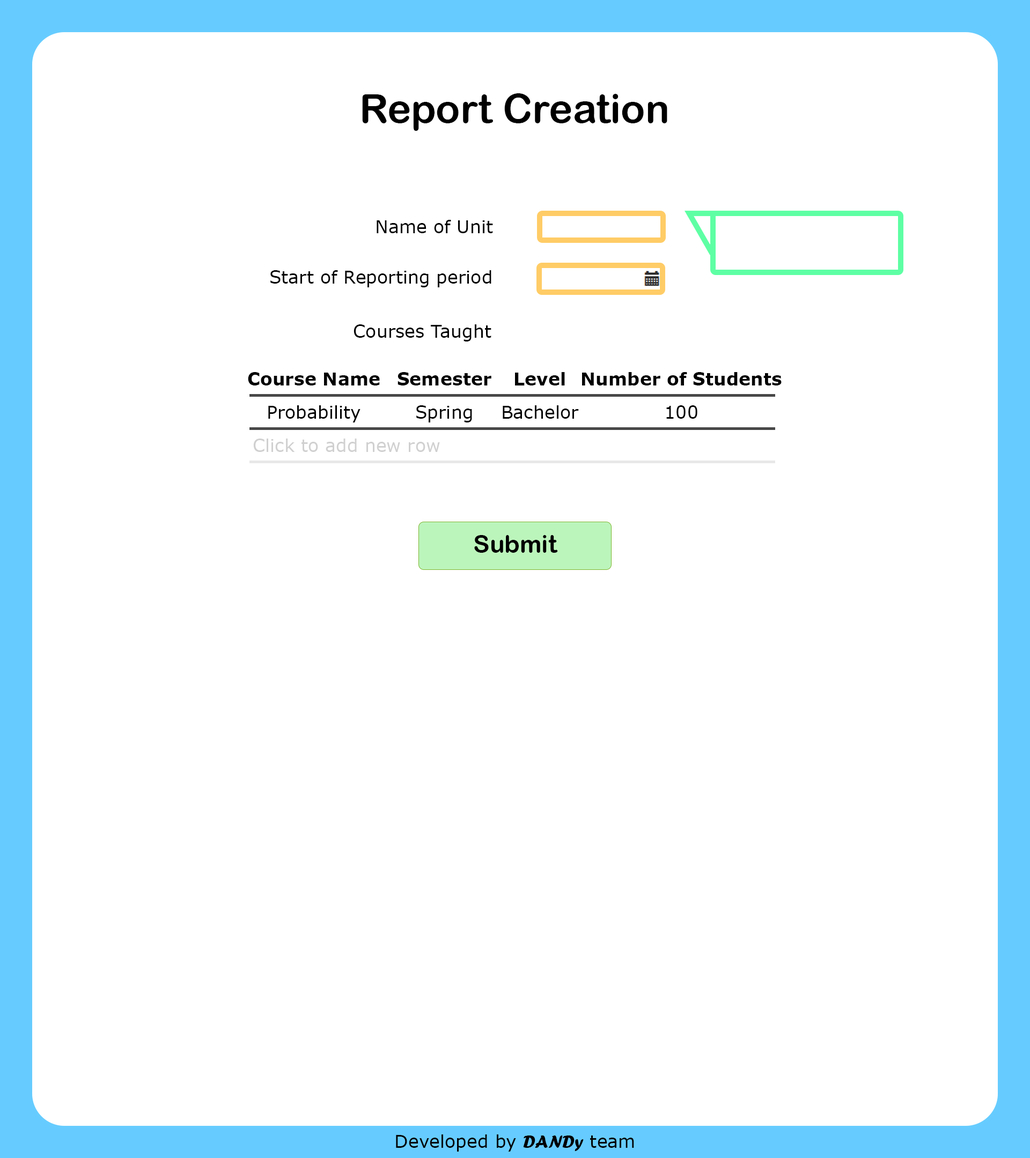
<style>
.page{position:relative;width:1030px;height:1158px;background:#ffffff}
.page>*{position:absolute;margin:0}
.t1{font:40.2px "ArialRoundedMTBold";color:#000000}
.t2{font:17.9px "Verdana";color:#000000}
.t3{font:17.9px "Verdana-Bold";color:#000000}
.t4{font:17.9px "Verdana";color:#d0d0d0}
.t5{font:24.6px "ArialRoundedMTBold";color:#000000}
.t6{font:17.9px "ForteMT";color:#000000}
</style>
<div class="page">
<p class="t1" style="left:362px;top:93px;width:305px;height:38px">Report Creation</p>
<p class="t2" style="left:376px;top:220px;width:117px;height:13px">Name of Unit</p>
<p class="t2" style="left:270px;top:270px;width:221px;height:17px">Start of Reporting period</p>
<p class="t2" style="left:353px;top:324px;width:138px;height:18px">Courses Taught</p>
<p class="t3" style="left:248px;top:372px;width:132px;height:14px">Course Name</p>
<p class="t3" style="left:397px;top:372px;width:94px;height:14px">Semester</p>
<p class="t3" style="left:515px;top:372px;width:50px;height:14px">Level</p>
<p class="t3" style="left:582px;top:372px;width:199px;height:14px">Number of Students</p>
<p class="t2" style="left:268px;top:405px;width:92px;height:18px">Probability</p>
<p class="t2" style="left:416px;top:405px;width:56px;height:18px">Spring</p>
<p class="t2" style="left:502px;top:405px;width:77px;height:14px">Bachelor</p>
<p class="t2" style="left:666px;top:405px;width:31px;height:14px">100</p>
<p class="t4" style="left:253px;top:439px;width:187px;height:13px">Click to add new row</p>
<p class="t5" style="left:474px;top:535px;width:84px;height:18px">Submit</p>
<p class="t2" style="left:396px;top:1135px;width:238px;height:17px">Developed by <span class="t6">DANDy</span> team</p>
</div>
